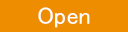
<style>
.page{position:relative;width:128px;height:32px;background:#ef8d00}
.page>*{position:absolute;margin:0}
.t1{font:24.1px "MS-PGothic";color:#ffffff}
</style>
<div class="page">
<p class="t1" style="left:38px;top:7px;width:52px;height:21px">Open</p>
</div>
